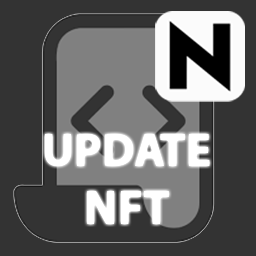
<style>
.page{position:relative;width:256px;height:256px;background:#333333}
.page>*{position:absolute;margin:0}
.t1{font:47px "MyriadPro-Bold";color:#ffffff}
.t2{font:48px "MyriadPro-Bold";color:#ffffff}
</style>
<div class="page">
<p class="t1" style="left:45px;top:134px;width:165px;height:90px;text-align:center">UPDATE<br><span class="t2">NFT</span></p>
</div>
